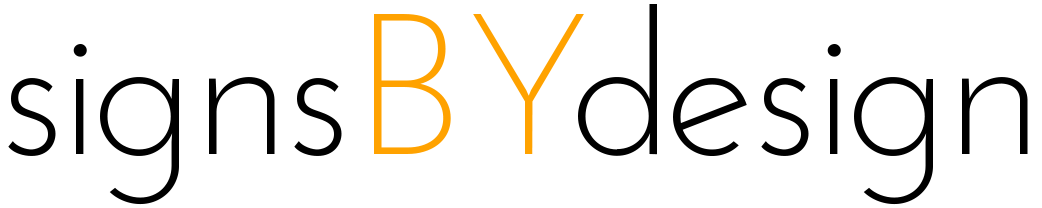
<style>
.page{position:relative;width:1042px;height:208px;background:#ffffff}
.page>*{position:absolute;margin:0}
.t1{font:199.7px "JosefinSansStd-Light";color:#000000}
.t2{font:199.7px "JosefinSansStd-Light";color:#ffa200}
</style>
<div class="page">
<p class="t1" style="left:8px;top:4px;width:1020px;height:201px">signs<span class="t2">BY</span>design</p>
</div>
